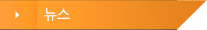
<style>
.page{position:relative;width:207px;height:30px}
.page>*{position:absolute;margin:0}
.t1{font:14px "NanumGothic";color:#ffffff}
</style>
<div class="page">
<p class="t1" style="left:44px;top:8px;width:26px;height:13px">뉴스</p>
</div>
